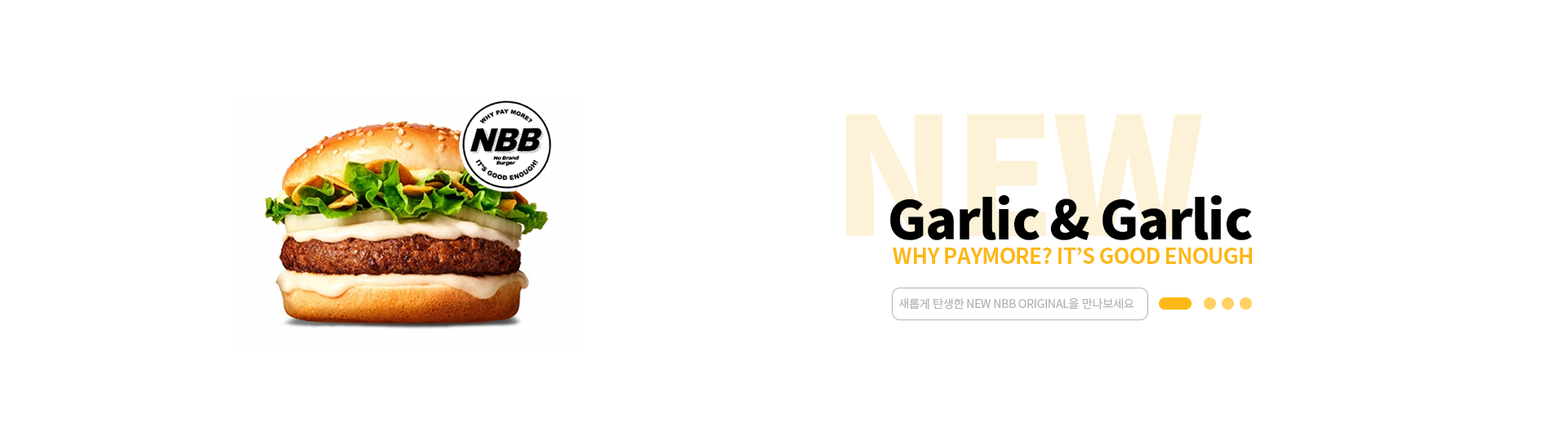
<style>
.page{position:relative;width:1568px;height:433px;background:#ffffff}
.page>*{position:absolute;margin:0}
.t1{font:53.1px "NotoSansKR-Black";letter-spacing:-0.025em;color:#000000}
.t2{font:21.2px "NotoSansKR-Bold";letter-spacing:-0.025em;color:#fcb814}
.t3{font:11.6px "NotoSansKR-Regular";letter-spacing:-0.025em;color:#b4b4b4}
</style>
<div class="page">
<p class="t1" style="left:890px;top:194px;width:362px;height:46px">Garlic &amp; Garlic</p>
<p class="t2" style="left:893px;top:247px;width:359px;height:17px">WHY PAYMORE? IT’S GOOD ENOUGH</p>
<p class="t3" style="left:898px;top:297px;width:236px;height:13px">새롭게 탄생한 NEW NBB ORIGINAL을 만나보세요</p>
</div>
